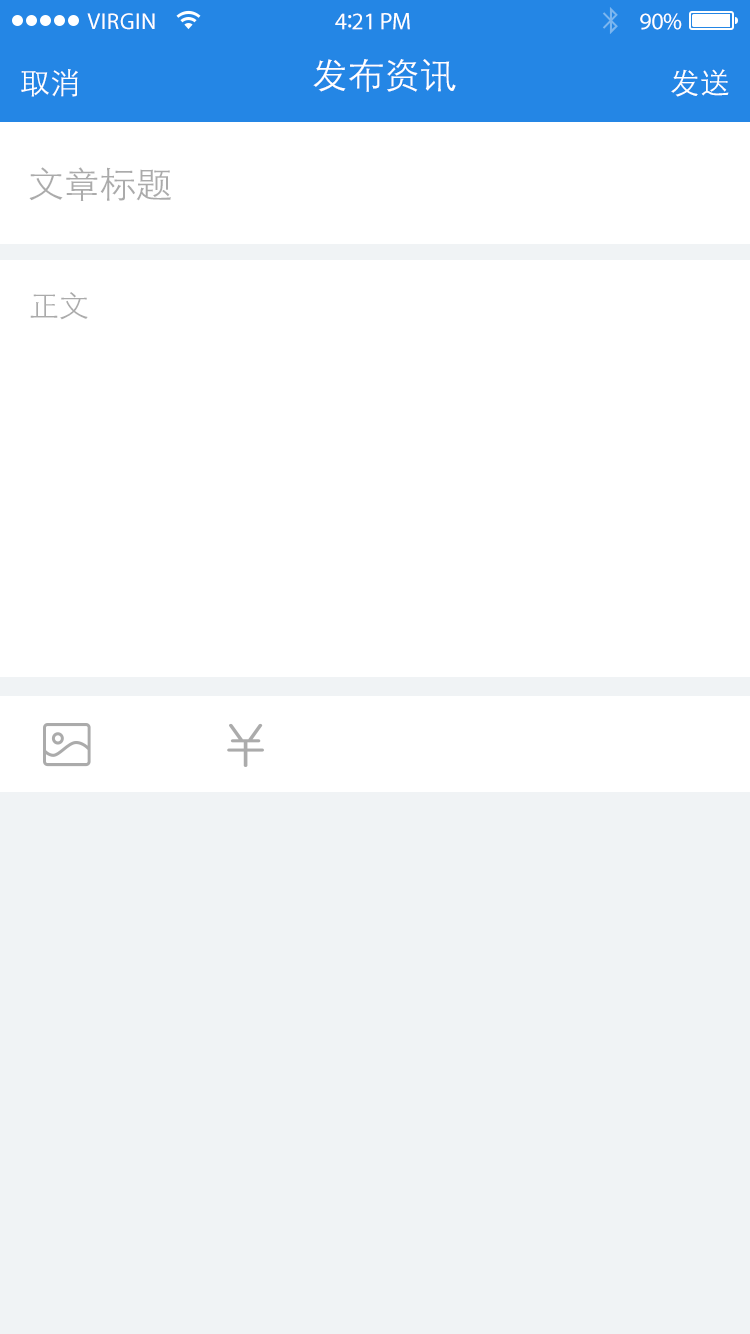
<style>
.page{position:relative;width:750px;height:1334px;background:#ffffff}
.page>*{position:absolute;margin:0}
.t1{font:23px "MyriadPro-Regular";letter-spacing:0.02em;color:#ffffff}
.t2{font:24px "MyriadPro-Regular";letter-spacing:-0.02em;color:#ffffff}
.t3{font:26px "MyriadPro-Regular";letter-spacing:-0.02em;color:#ffffff}
.t4{font:36px "STXihei";color:#ffffff}
.t5{font:30px "STXihei";color:#ffffff}
.t6{font:36px "STXihei";color:#ababab}
.t7{font:30px "STXihei";color:#ababab}
</style>
<div class="page">
<p class="t1" style="left:87px;top:13px;width:68px;height:17px">VIRGIN</p>
<p class="t2" style="left:335px;top:13px;width:75px;height:17px">4<span class="t3">:</span>21 PM</p>
<p class="t2" style="left:640px;top:13px;width:42px;height:17px">90%</p>
<p class="t4" style="left:313px;top:59px;width:143px;height:33px">发布资讯</p>
<p class="t5" style="left:21px;top:69px;width:57px;height:28px">取消</p>
<p class="t5" style="left:671px;top:69px;width:58px;height:28px">发送</p>
<p class="t6" style="left:29px;top:167px;width:142px;height:34px">文章标题</p>
<p class="t7" style="left:30px;top:292px;width:58px;height:28px">正文</p>
</div>
